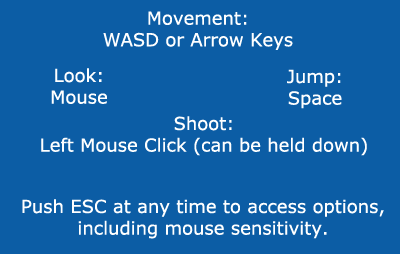
<style>
.page{position:relative;width:400px;height:254px;background:#0c5da5}
.page>*{position:absolute;margin:0}
.t1{font:18px "Verdana";color:#ffffff}
</style>
<div class="page">
<p class="t1" style="left:103px;top:11px;width:190px;height:39px;text-align:center">Movement:<br>WASD or Arrow Keys</p>
<p class="t1" style="left:51px;top:68px;width:56px;height:36px;text-align:center">Look:<br>Mouse</p>
<p class="t1" style="left:287px;top:69px;width:55px;height:40px;text-align:center">Jump:<br>Space</p>
<p class="t1" style="left:41px;top:116px;width:326px;height:40px;text-align:center">Shoot:<br>Left Mouse Click (can be held down)</p>
<p class="t1" style="left:22px;top:199px;width:362px;height:40px;text-align:center">Push ESC at any time to access options,<br>including mouse sensitivity.</p>
</div>
